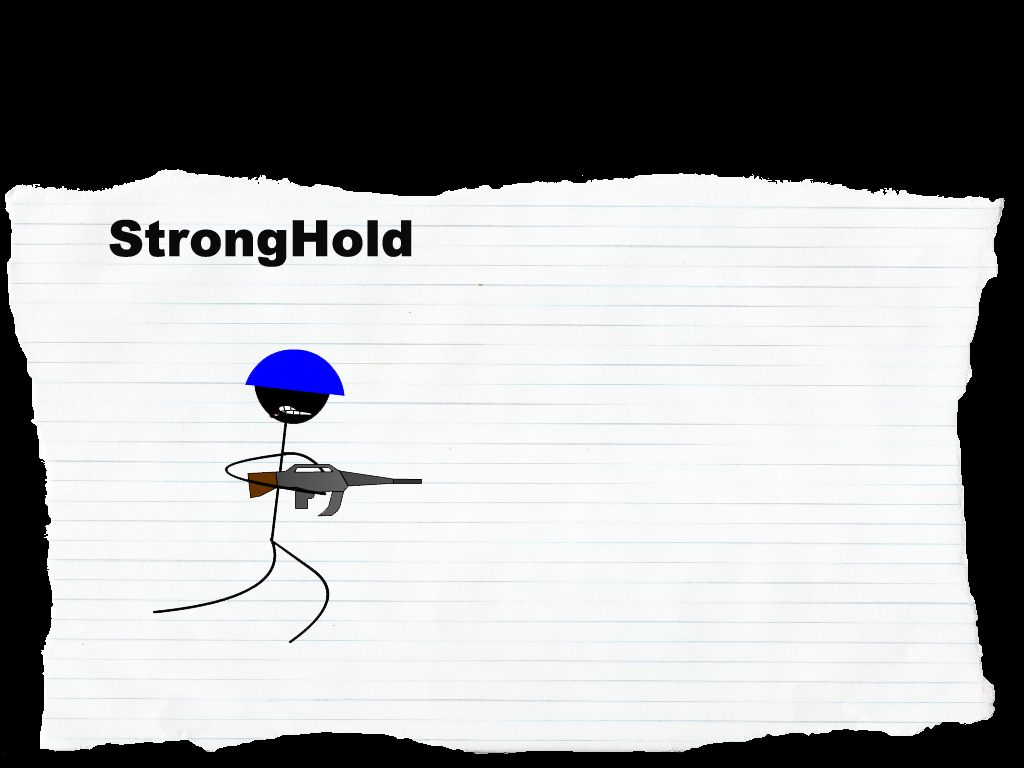
<style>
.page{position:relative;width:1024px;height:768px;background:#000000}
.page>*{position:absolute;margin:0}
.t1{font:50px "Arial-Black";color:#0a0a0a}
</style>
<div class="page">
<p class="t1" style="left:109px;top:219px;width:303px;height:48px">StrongHold</p>
</div>
